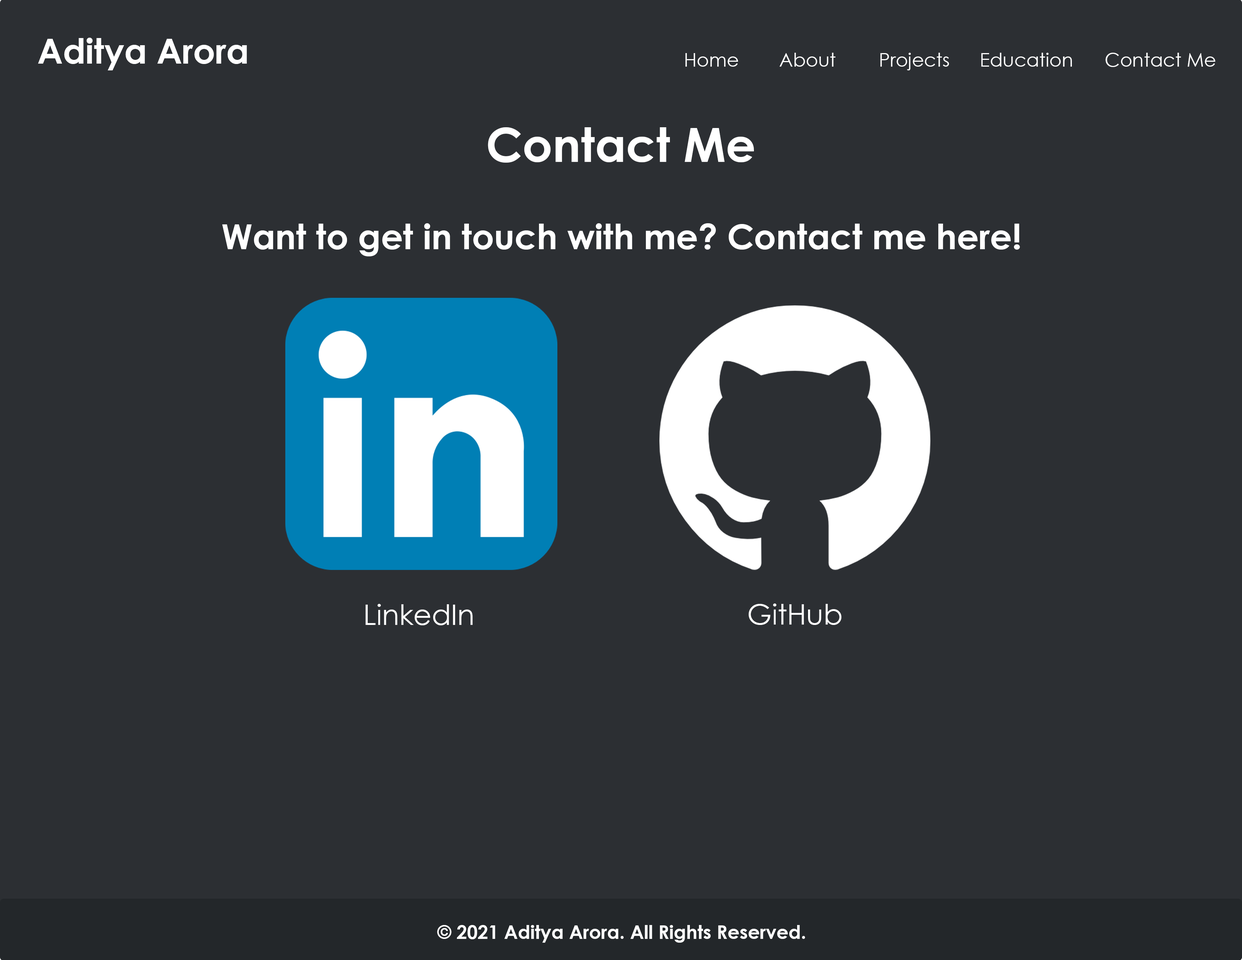
<style>
.page{position:relative;width:1242px;height:960px;background:#2c2f33}
.page>*{position:absolute;margin:0}
.t1{font:34.5px "CenturyGothic-Bold";color:#ffffff}
.t2{font:18.8px "CenturyGothic";color:#ffffff}
.t3{font:47.1px "CenturyGothic-Bold";color:#ffffff}
.t4{font:28.2px "CenturyGothic";color:#ffffff}
.t5{font:18.8px "CenturyGothic-Bold";color:#ffffff}
</style>
<div class="page">
<p class="t1" style="left:38px;top:38px;width:209px;height:32px">Aditya Arora</p>
<p class="t2" style="left:685px;top:53px;width:53px;height:14px">Home</p>
<p class="t2" style="left:780px;top:53px;width:56px;height:14px">About</p>
<p class="t2" style="left:880px;top:53px;width:69px;height:17px">Projects</p>
<p class="t2" style="left:981px;top:53px;width:91px;height:14px">Education</p>
<p class="t2" style="left:1106px;top:53px;width:110px;height:14px">Contact Me</p>
<p class="t3" style="left:488px;top:127px;width:266px;height:36px">Contact Me</p>
<p class="t1" style="left:222px;top:223px;width:798px;height:33px">Want to get in touch with me? Contact me here!</p>
<p class="t4" style="left:366px;top:604px;width:107px;height:21px">LinkedIn</p>
<p class="t4" style="left:749px;top:603px;width:93px;height:22px">GitHub</p>
<p class="t5" style="left:437px;top:925px;width:368px;height:18px">© 2021 Aditya Arora. All Rights Reserved.</p>
</div>
